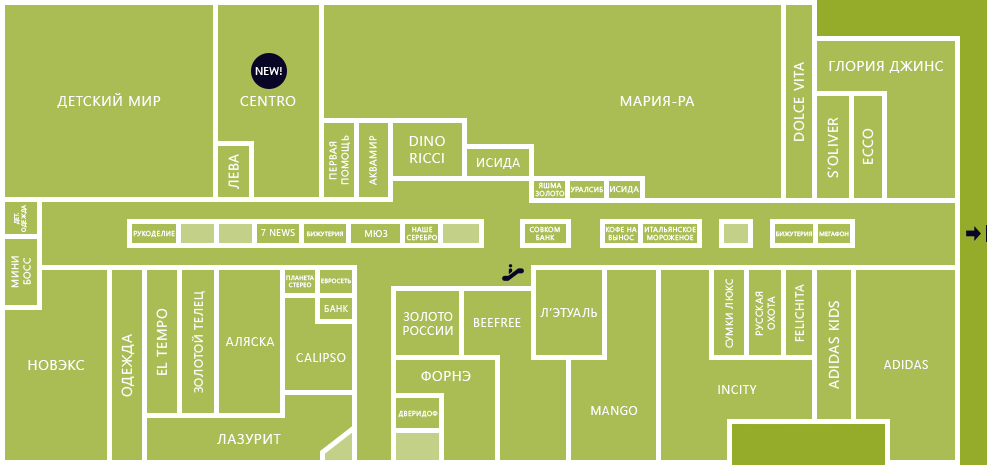
<style>
.page{position:relative;width:987px;height:465px;background:#a9bd54}
.page>*{position:absolute;margin:0}
.t1{font:14px "SegoeUI";letter-spacing:0.05em;color:#ffffff;text-transform:uppercase}
.t2{font:11px "SegoeUI";color:#ffffff;text-transform:uppercase}
.t3{font:10px "SegoeUI";letter-spacing:0.05em;color:#ffffff;text-transform:uppercase}
.t4{font:12px "SegoeUI";letter-spacing:0.05em;color:#ffffff;text-transform:uppercase}
.t5{font:7px "SegoeUI";letter-spacing:0.05em;color:#ffffff;text-transform:uppercase}
.t6{font:8px "SegoeUI";letter-spacing:0.05em;color:#ffffff;text-transform:uppercase}
.t7{font:6px "SegoeUI";letter-spacing:0.05em;color:#ffffff;text-transform:uppercase}
.t8{font:9px "SegoeUI";letter-spacing:0.05em;color:#ffffff;text-transform:uppercase}
</style>
<div class="page">
<p class="t1" style="left:793px;top:62px;width:12px;height:79px;rotate:-90deg">Dolce vita</p>
<p class="t1" style="left:829px;top:61px;width:114px;height:12px">Глория джинс</p>
<p class="t2" style="left:255px;top:67px;width:27px;height:8px">New!</p>
<p class="t1" style="left:57px;top:93px;width:104px;height:15px">Детский мир</p>
<p class="t1" style="left:240px;top:96px;width:56px;height:10px">Centro</p>
<p class="t1" style="left:620px;top:96px;width:75px;height:10px">Мария-ра</p>
<p class="t1" style="left:827px;top:117px;width:12px;height:61px;rotate:-90deg">s’oliver</p>
<p class="t3" style="left:329px;top:135px;width:22px;height:50px;text-align:center;rotate:-90deg">Первая<br>помощь</p>
<p class="t3" style="left:369px;top:135px;width:8px;height:50px;rotate:-90deg">Аквамир</p>
<p class="t1" style="left:409px;top:136px;width:36px;height:27px;text-align:center">Dino<br>Ricci</p>
<p class="t1" style="left:862px;top:128px;width:12px;height:36px;rotate:-90deg">Ecco</p>
<p class="t1" style="left:228px;top:154px;width:11px;height:36px;rotate:-90deg">Лева</p>
<p class="t4" style="left:477px;top:158px;width:43px;height:11px">Исида</p>
<p class="t5" style="left:535px;top:182px;width:30px;height:15px;text-align:center">Яшма<br>золото</p>
<p class="t5" style="left:570px;top:186px;width:33px;height:7px">Уралсиб</p>
<p class="t6" style="left:610px;top:186px;width:29px;height:8px">Исида</p>
<p class="t7" style="left:14px;top:205px;width:13px;height:27px;text-align:center;rotate:-90deg">Дет.<br>одежда</p>
<p class="t5" style="left:133px;top:230px;width:42px;height:8px">Рукоделие</p>
<p class="t8" style="left:261px;top:229px;width:34px;height:7px">7 news</p>
<p class="t7" style="left:307px;top:231px;width:36px;height:6px">Бижутерия</p>
<p class="t8" style="left:365px;top:230px;width:23px;height:7px">Мюз</p>
<p class="t5" style="left:406px;top:226px;width:31px;height:15px;text-align:center">Наше<br>серебро</p>
<p class="t5" style="left:529px;top:226px;width:31px;height:15px;text-align:center">Совком<br>банк</p>
<p class="t5" style="left:606px;top:226px;width:31px;height:15px;text-align:center">Кофе на<br>вынос</p>
<p class="t5" style="left:644px;top:226px;width:52px;height:15px;text-align:center">Итальянское<br>мороженое</p>
<p class="t7" style="left:776px;top:231px;width:36px;height:6px">Бижутерия</p>
<p class="t7" style="left:819px;top:231px;width:30px;height:6px">Мегафон</p>
<p class="t3" style="left:11px;top:256px;width:20px;height:32px;text-align:center;rotate:-90deg">Мини<br>босс</p>
<p class="t7" style="left:286px;top:275px;width:28px;height:13px;text-align:center">Планета<br>стерео</p>
<p class="t7" style="left:321px;top:278px;width:30px;height:6px">Евросеть</p>
<p class="t3" style="left:725px;top:279px;width:8px;height:69px;rotate:-90deg">Сумки люкс</p>
<p class="t4" style="left:191px;top:291px;width:14px;height:102px;rotate:-90deg">Золотой телец</p>
<p class="t3" style="left:755px;top:291px;width:20px;height:45px;text-align:center;rotate:-90deg">Русская<br>охота</p>
<p class="t4" style="left:795px;top:284px;width:9px;height:58px;rotate:-90deg">Felichita</p>
<p class="t8" style="left:324px;top:305px;width:24px;height:7px">Банк</p>
<p class="t1" style="left:828px;top:301px;width:12px;height:88px;rotate:-90deg">Adidas kids</p>
<p class="t1" style="left:156px;top:308px;width:12px;height:67px;rotate:-90deg">El tempo</p>
<p class="t4" style="left:403px;top:312px;width:50px;height:23px;text-align:center">Золото<br>России</p>
<p class="t4" style="left:474px;top:318px;width:47px;height:9px">Beefree</p>
<p class="t4" style="left:540px;top:308px;width:57px;height:9px">л’этуаль</p>
<p class="t1" style="left:121px;top:334px;width:14px;height:63px;rotate:-90deg">Одежда</p>
<p class="t4" style="left:225px;top:337px;width:50px;height:9px">Аляска</p>
<p class="t4" style="left:296px;top:353px;width:50px;height:9px">Calipso</p>
<p class="t1" style="left:28px;top:360px;width:56px;height:10px">Новэкс</p>
<p class="t4" style="left:884px;top:360px;width:44px;height:9px">Adidas</p>
<p class="t1" style="left:421px;top:371px;width:50px;height:10px">Форнэ</p>
<p class="t4" style="left:718px;top:385px;width:39px;height:9px">Incity</p>
<p class="t5" style="left:398px;top:410px;width:40px;height:8px">Дверидоф</p>
<p class="t4" style="left:591px;top:406px;width:47px;height:9px">Mango</p>
<p class="t1" style="left:217px;top:434px;width:64px;height:10px">Лазурит</p>
</div>
